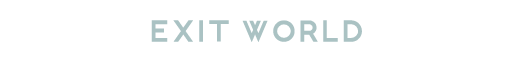
<style>
.page{position:relative;width:512px;height:64px;background:#ffffff}
.page>*{position:absolute;margin:0}
.t1{font:30px "CocoPuff-Regular";letter-spacing:0.025em;color:#aac2c3}
</style>
<div class="page">
<p class="t1" style="left:151px;top:20px;width:211px;height:22px">exit world</p>
</div>
